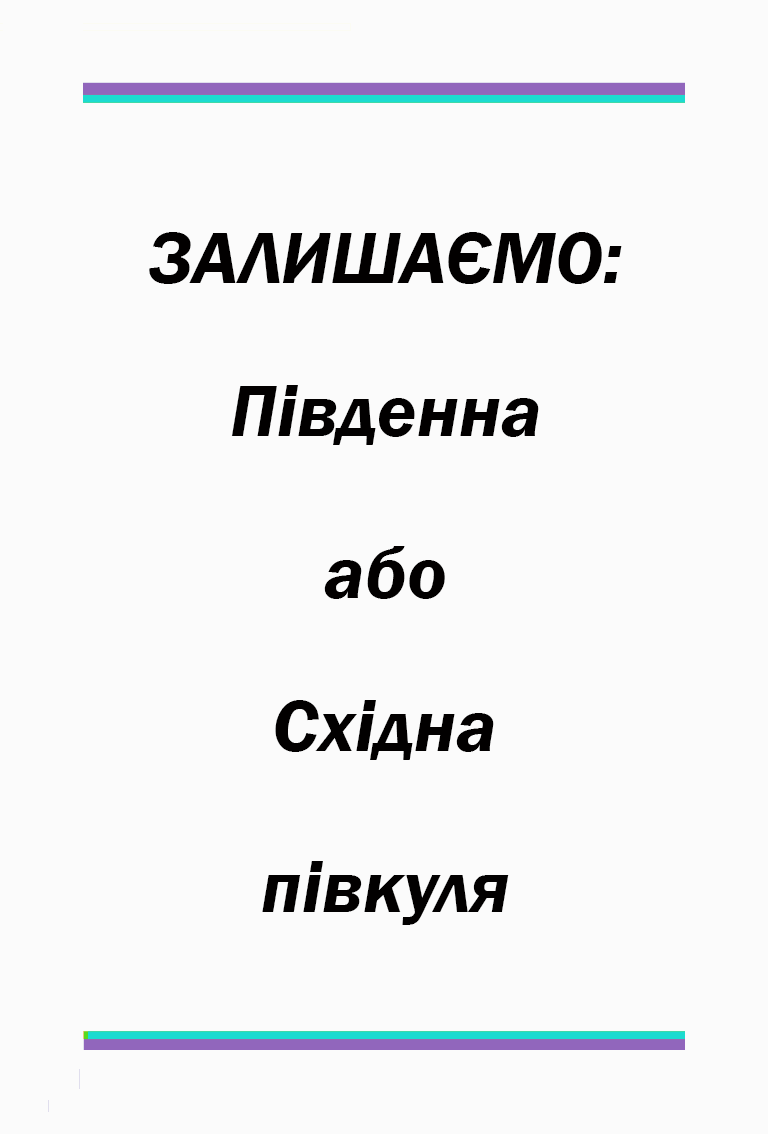
<style>
.page{position:relative;width:768px;height:1134px;background:#fbfbfb}
.page>*{position:absolute;margin:0}
.t1{font:75px "FranklinGothic-DemiItalic";color:#020000}
</style>
<div class="page">
<p class="t1" style="left:149px;top:232px;width:473px;height:52px">ЗАЛИШАЄМО:</p>
<p class="t1" style="left:231px;top:385px;width:308px;height:60px">Південна</p>
<p class="t1" style="left:324px;top:546px;width:121px;height:53px">або</p>
<p class="t1" style="left:275px;top:700px;width:219px;height:60px">Східна</p>
<p class="t1" style="left:262px;top:861px;width:247px;height:64px">півкуля</p>
</div>
